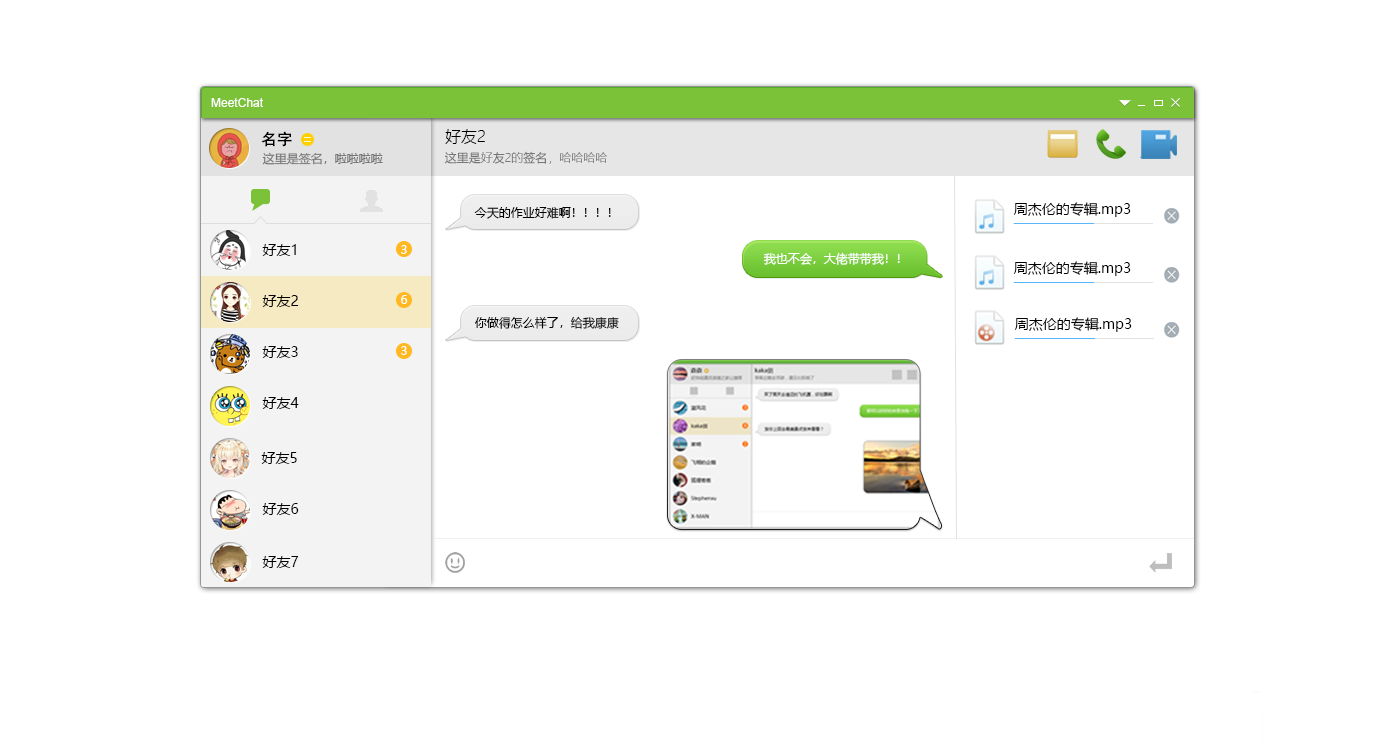
<style>
.page{position:relative;width:1400px;height:752px;background:#ffffff}
.page>*{position:absolute;margin:0}
.t1{font:12px "ArialMT";color:#ffffff}
.t2{font:16px "AdobeHeitiStd-Regular";color:#000000}
.t3{font:16px "MicrosoftYaHeiLight";color:#000000}
.t4{font:12px "MicrosoftYaHei";color:#767676}
.t5{font:12px "MicrosoftYaHeiLight";color:#767676}
.t6{font:12px "MicrosoftYaHei";color:#000000}
.t7{font:14px "MicrosoftYaHei";color:#000000}
.t8{font:12px "MicrosoftYaHei";color:#ffffff}
</style>
<div class="page">
<p class="t1" style="left:211px;top:98px;width:52px;height:9px">MeetChat</p>
<p class="t2" style="left:261px;top:131px;width:31px;height:16px">名字</p>
<p class="t3" style="left:445px;top:129px;width:40px;height:15px">好友2</p>
<p class="t4" style="left:262px;top:152px;width:121px;height:13px">这里是签名，啦啦啦啦</p>
<p class="t5" style="left:444px;top:151px;width:163px;height:13px">这里是好友2的签名，哈哈哈哈</p>
<p class="t6" style="left:474px;top:207px;width:137px;height:12px">今天的作业好难啊！！！！</p>
<p class="t7" style="left:1013px;top:202px;width:118px;height:15px">周杰伦的专辑.mp3</p>
<p class="t7" style="left:262px;top:244px;width:34px;height:12px">好友1</p>
<p class="t8" style="left:401px;top:245px;width:6px;height:9px">3</p>
<p class="t8" style="left:763px;top:252px;width:137px;height:13px">我也不会，大佬带带我！！</p>
<p class="t7" style="left:1013px;top:261px;width:118px;height:15px">周杰伦的专辑.mp3</p>
<p class="t7" style="left:262px;top:295px;width:37px;height:12px">好友2</p>
<p class="t8" style="left:401px;top:295px;width:7px;height:9px">6</p>
<p class="t6" style="left:475px;top:316px;width:144px;height:13px">你做得怎么样了，给我康康</p>
<p class="t7" style="left:1014px;top:317px;width:118px;height:15px">周杰伦的专辑.mp3</p>
<p class="t7" style="left:262px;top:346px;width:36px;height:12px">好友3</p>
<p class="t8" style="left:401px;top:346px;width:6px;height:9px">3</p>
<p class="t7" style="left:262px;top:397px;width:37px;height:12px">好友4</p>
<p class="t7" style="left:261px;top:452px;width:36px;height:12px">好友5</p>
<p class="t7" style="left:262px;top:503px;width:37px;height:12px">好友6</p>
<p class="t7" style="left:262px;top:556px;width:37px;height:12px">好友7</p>
</div>
